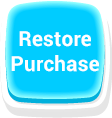
<style>
.page{position:relative;width:112px;height:118px;background:#00ccff}
.page>*{position:absolute;margin:0}
.t1{font:20.8px "Roboto-Bold";letter-spacing:0.01em;color:#ffffff}
</style>
<div class="page">
<p class="t1" style="left:11px;top:31px;width:88px;height:41px;text-align:center">Restore<br>Purchase</p>
</div>
